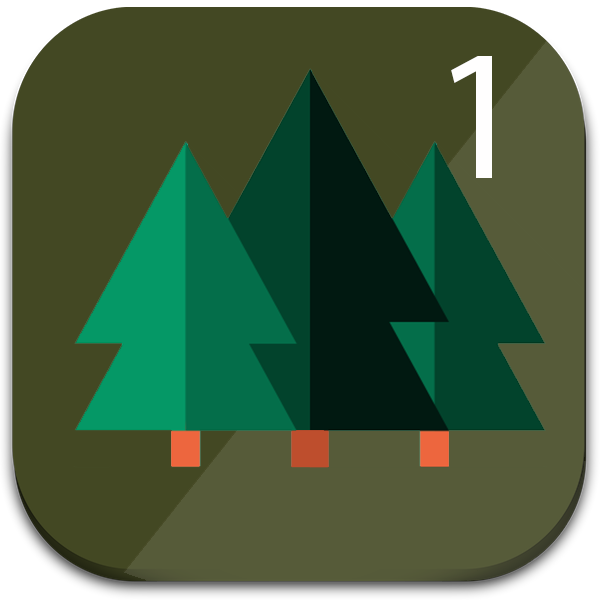
<style>
.page{position:relative;width:600px;height:600px;background:#434823}
.page>*{position:absolute;margin:0}
.t1{font:187.5px "MyriadPro-Regular";color:#fffefe}
</style>
<div class="page">
<p class="t1" style="left:451px;top:56px;width:41px;height:122px">1</p>
</div>
